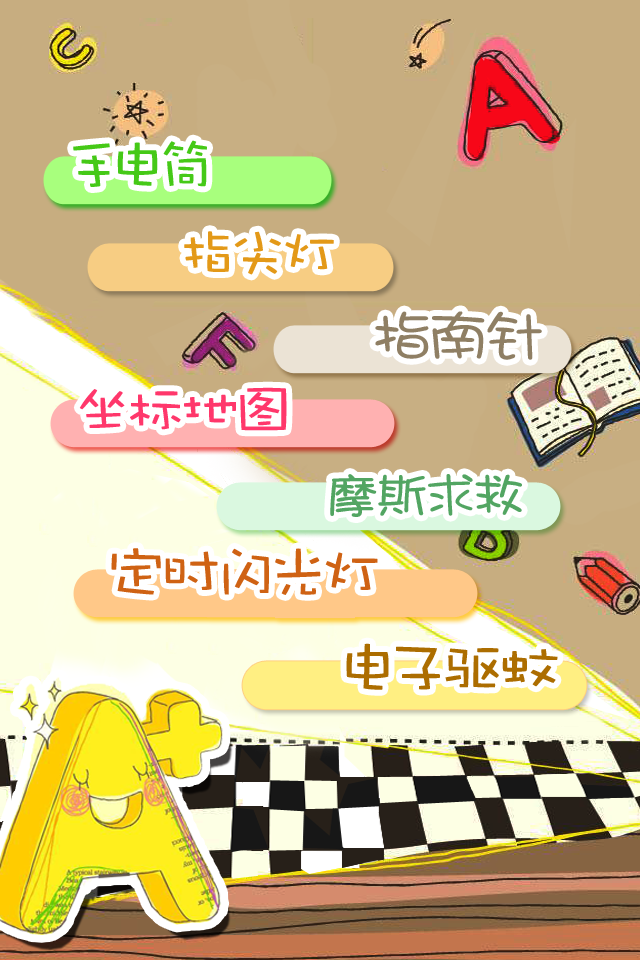
<style>
.page{position:relative;width:640px;height:960px;background:#c7ad80}
.page>*{position:absolute;margin:0}
.t1{font:56.2px "DFPWaWaW5";color:#45c917;scale:1.11 1}
.t2{font:56.2px "DFPWaWaW5";color:#e39918;scale:1.11 1}
.t3{font:56.2px "DFPShaoNvW5";color:#8f7f64;scale:1.11 1}
.t4{font:56.2px "DFPWaWaW5";color:#ff376b;scale:1.11 1}
.t5{font:48.8px "DFPShaoNvW5";color:#52a562;scale:1.11 1}
.t6{font:60px "DFPWaWaW5";color:#cf6213;scale:1.11 1}
.t7{font:60px "DFPWaWaW5";color:#ac6d00;scale:1.11 1}
</style>
<div class="page">
<p class="t1" style="left:73px;top:140px;width:134px;height:47px">手电筒</p>
<p class="t2" style="left:184px;top:231px;width:150px;height:44px">指尖灯</p>
<p class="t3" style="left:375px;top:311px;width:167px;height:49px">指南针</p>
<p class="t4" style="left:79px;top:387px;width:208px;height:44px">坐标地图</p>
<p class="t5" style="left:330px;top:474px;width:192px;height:43px">摩斯求救</p>
<p class="t6" style="left:111px;top:548px;width:267px;height:47px">定时闪光灯</p>
<p class="t7" style="left:346px;top:643px;width:212px;height:47px">电子驱蚊</p>
</div>
